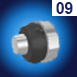
<style>
.page{position:relative;width:77px;height:77px}
.page>*{position:absolute;margin:0}
.t1{font:16px "Arial-BoldMT";color:#182163}
</style>
<div class="page">
<p class="t1" style="left:56px;top:2px;width:17px;height:12px">09</p>
</div>
